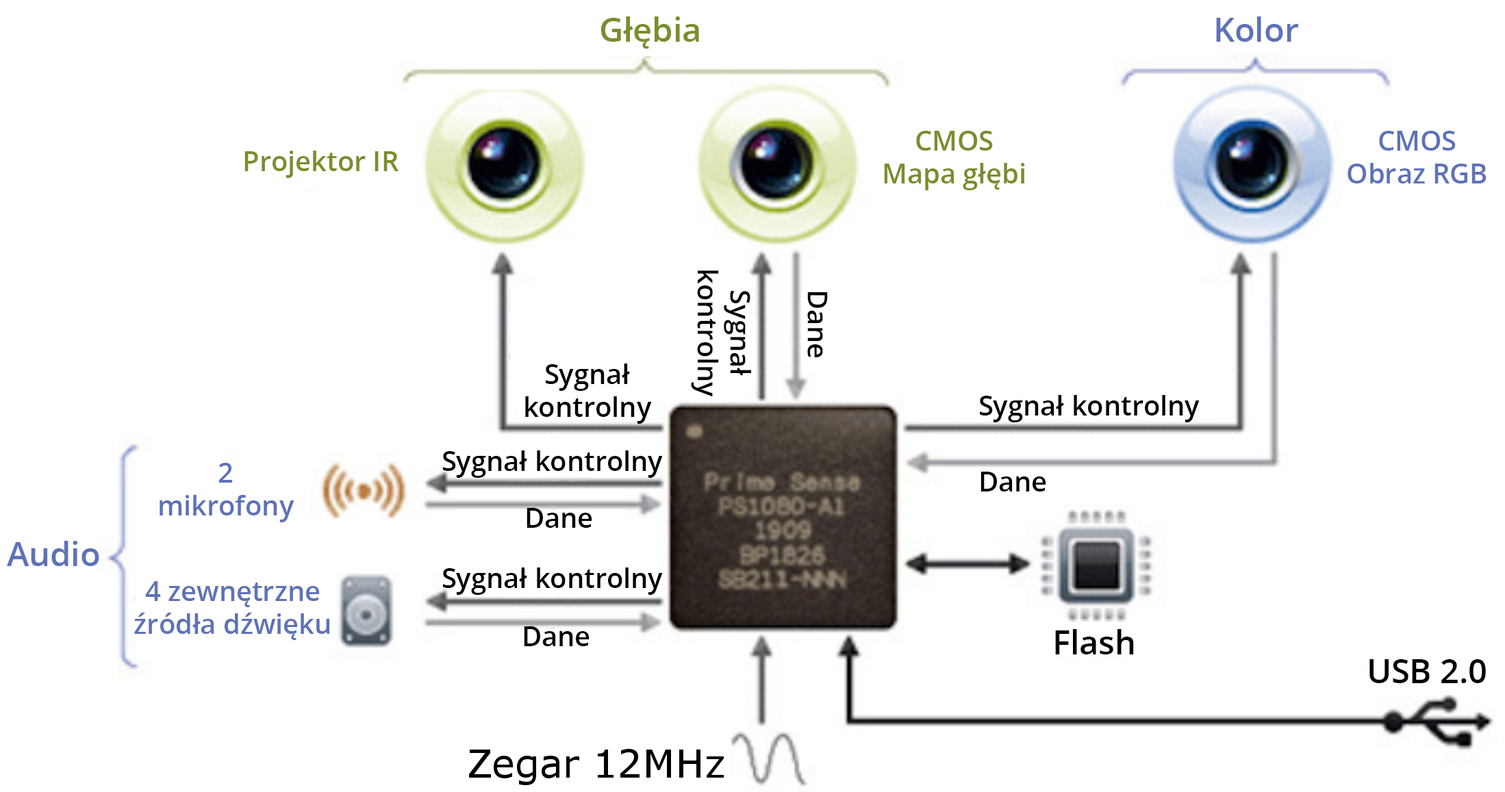
<style>
.page{position:relative;width:1505px;height:792px;background:#ffffff}
.page>*{position:absolute;margin:0}
.t1{font:33.3px "OpenSans-Semibold";color:#798e2c}
.t2{font:33.3px "OpenSans-Semibold";color:#5e72b7}
.t3{font:27.3px "OpenSans-Semibold";color:#798e2c}
.t4{font:27.3px "OpenSans-Semibold";color:#5e72b7}
.t5{font:27.3px "OpenSans-Semibold";color:#000000}
.t6{font:33.3px "OpenSans-Semibold";color:#000000}
</style>
<div class="page">
<p class="t1" style="left:601px;top:16px;width:98px;height:33px">Głębia</p>
<p class="t2" style="left:1216px;top:16px;width:83px;height:26px">Kolor</p>
<p class="t3" style="left:884px;top:131px;width:141px;height:59px;text-align:center">CMOS<br>Mapa głębi</p>
<p class="t4" style="left:1348px;top:131px;width:139px;height:53px;text-align:center">CMOS<br>Obraz RGB</p>
<p class="t3" style="left:244px;top:151px;width:155px;height:27px">Projektor IR</p>
<p class="t5" style="left:691px;top:270px;width:60px;height:127px;text-align:center;rotate:90deg">Sygnał<br>kontrolny</p>
<p class="t5" style="left:807px;top:292px;width:21px;height:65px;rotate:90deg">Dane</p>
<p class="t5" style="left:525px;top:364px;width:127px;height:60px;text-align:center">Sygnał <br>kontrolny</p>
<p class="t5" style="left:980px;top:395px;width:220px;height:27px">Sygnał kontrolny</p>
<p class="t5" style="left:443px;top:451px;width:220px;height:27px">Sygnał kontrolny</p>
<p class="t4" style="left:160px;top:463px;width:134px;height:59px;text-align:center">2<br>mikrofony</p>
<p class="t5" style="left:981px;top:472px;width:65px;height:20px">Dane</p>
<p class="t5" style="left:527px;top:508px;width:65px;height:20px">Dane</p>
<p class="t2" style="left:7px;top:541px;width:92px;height:25px">Audio</p>
<p class="t5" style="left:443px;top:568px;width:220px;height:27px">Sygnał kontrolny</p>
<p class="t4" style="left:134px;top:581px;width:196px;height:59px;text-align:center">4 zewnętrzne<br>źródła dźwięku</p>
<p class="t5" style="left:524px;top:627px;width:66px;height:19px">Dane</p>
<p class="t6" style="left:1055px;top:629px;width:79px;height:26px">Flash</p>
<p class="t6" style="left:1370px;top:659px;width:116px;height:24px">USB 2.0</p>
</div>
